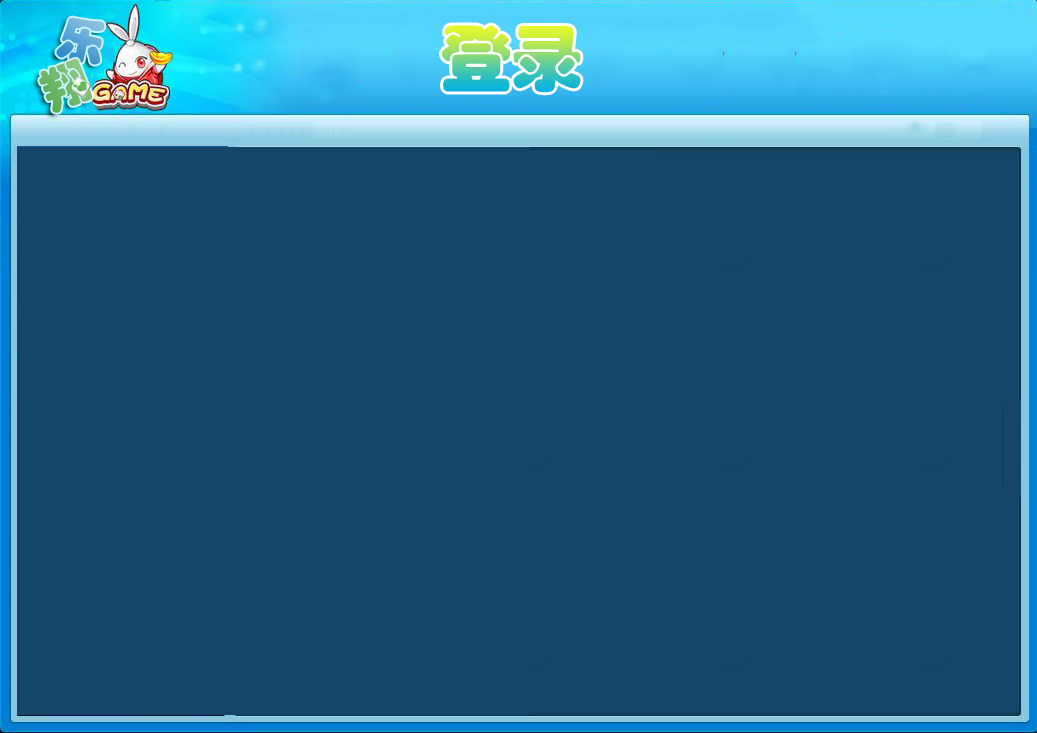
<style>
.page{position:relative;width:1037px;height:733px;background:#154667}
.page>*{position:absolute;margin:0}
.t1{font:72px "STHupo"}
</style>
<div class="page">
<p class="t1" style="left:442px;top:25px;width:139px;height:68px">登录</p>
</div>
